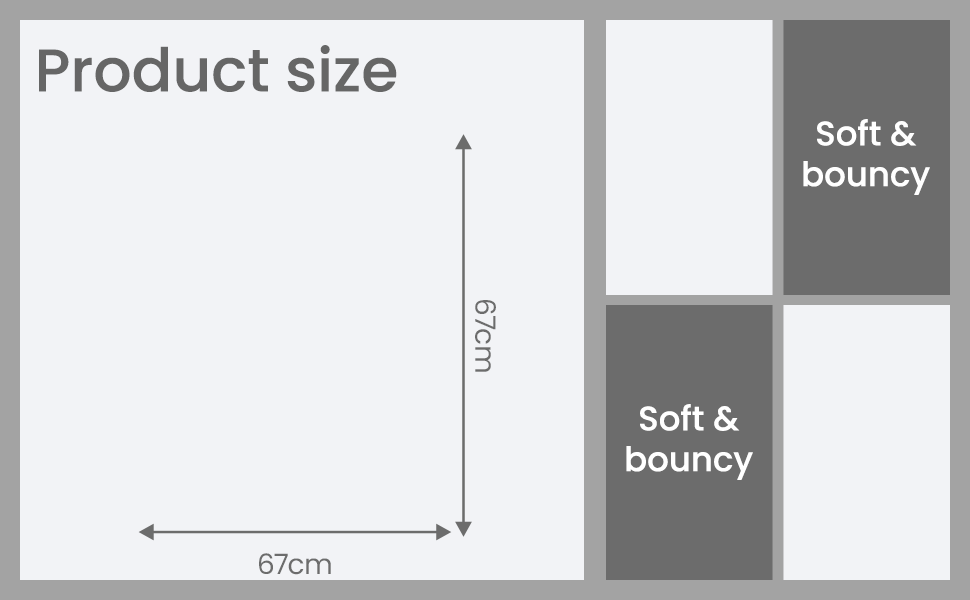
<style>
.page{position:relative;width:970px;height:600px;background:#f2f3f6}
.page>*{position:absolute;margin:0}
.t1{font:60px "Poppins-Medium";color:#666666}
.t2{font:34px "Poppins-Medium";color:#ffffff}
.t3{font:28px "Poppins-Regular";color:#6c6c6c}
</style>
<div class="page">
<p class="t1" style="left:39px;top:45px;width:358px;height:47px">Product size</p>
<p class="t2" style="left:803px;top:119px;width:127px;height:76px;text-align:center">Soft &amp;<br>bouncy</p>
<p class="t3" style="left:475px;top:300px;width:21px;height:72px;rotate:90deg">67cm</p>
<p class="t2" style="left:626px;top:404px;width:127px;height:76px;text-align:center">Soft &amp;<br>bouncy</p>
<p class="t3" style="left:259px;top:553px;width:72px;height:22px">67cm</p>
</div>
